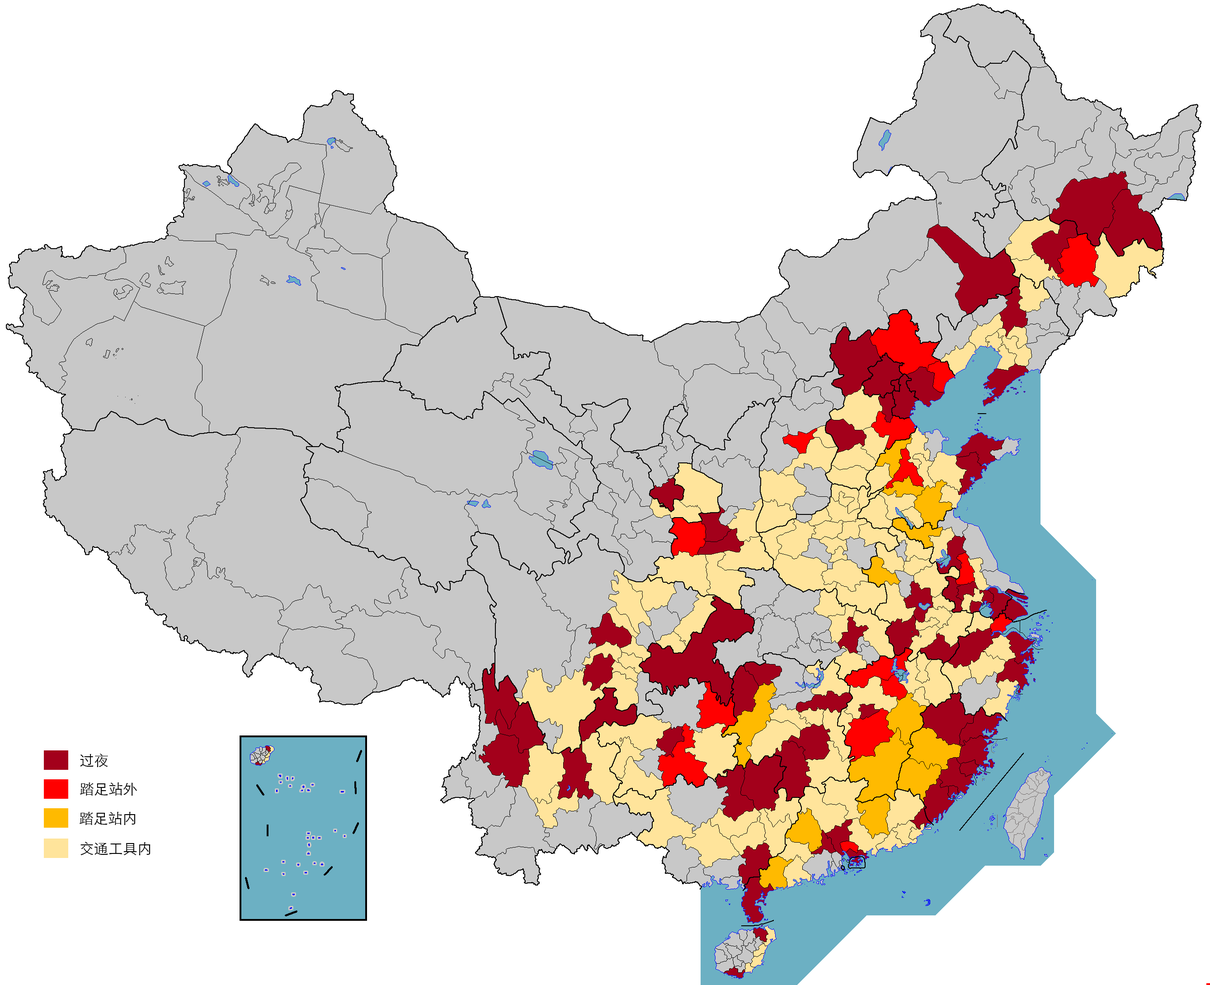
<style>
.page{position:relative;width:1210px;height:985px;background:#ffffff}
.page>*{position:absolute;margin:0}
.t1{font:14.5px "STHeitiSC-Light";color:#000000}
</style>
<div class="page">
<p class="t1" style="left:80px;top:754px;width:28px;height:13px">过夜</p>
<p class="t1" style="left:80px;top:783px;width:57px;height:13px">踏足站外</p>
<p class="t1" style="left:79px;top:812px;width:57px;height:13px">踏足站内</p>
<p class="t1" style="left:80px;top:842px;width:71px;height:13px">交通工具内</p>
</div>
